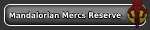
<style>
.page{position:relative;width:150px;height:30px;background:#333333}
.page>*{position:absolute;margin:0}
.t1{font:8px "DejaVuSansCondensed-Bold";color:#ffffff}
</style>
<div class="page">
<p class="t1" style="left:9px;top:12px;width:112px;height:7px">Mandalorian Mercs Reserve</p>
</div>
